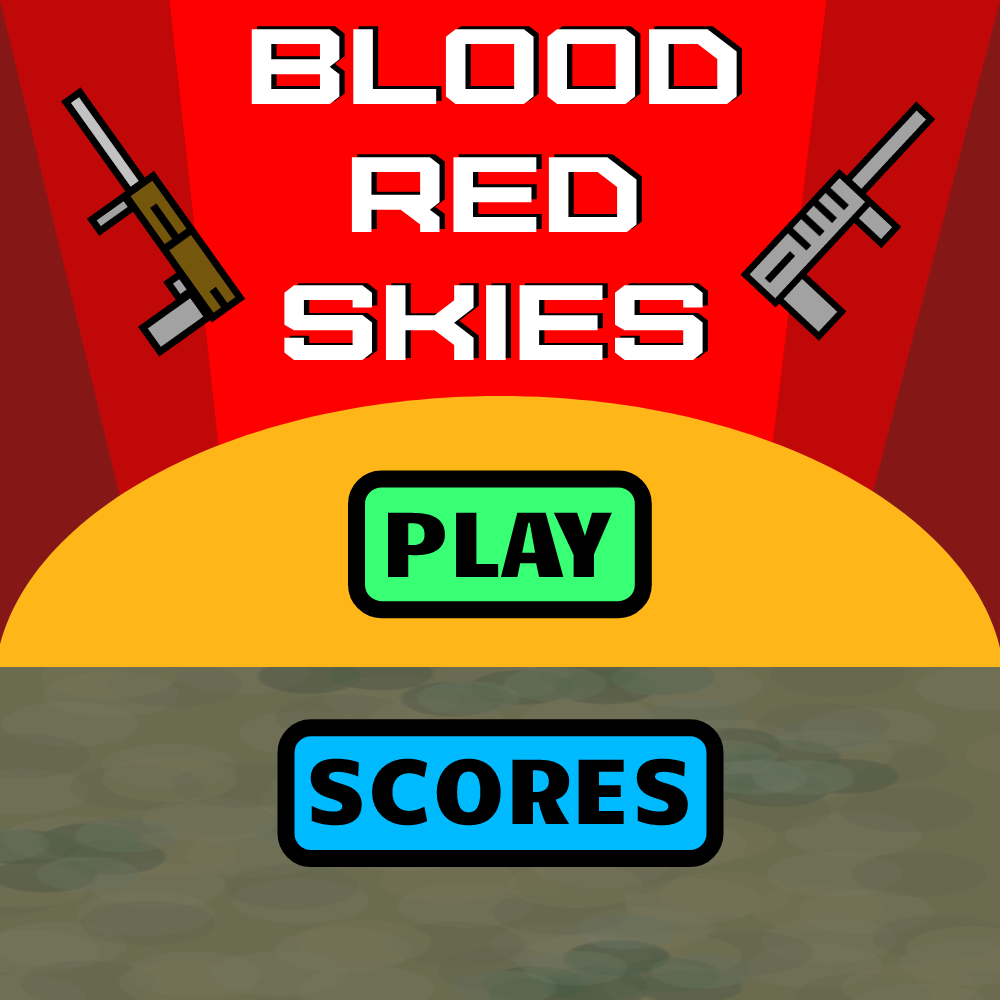
<style>
.page{position:relative;width:1000px;height:1000px}
.page>*{position:absolute;margin:0}
.t1{font:106.9px "Furore";color:#ffffff;scale:1.3 1}
.t2{font:92.9px "Candal";color:#000000}
</style>
<div class="page">
<p class="t1" style="left:251px;top:29px;width:486px;height:331px;text-align:center">BLOOD<br>RED<br>SKies</p>
<p class="t1" style="left:257px;top:26px;width:485px;height:332px;text-align:center">BLOOD<br>RED<br>SKies</p>
<p class="t2" style="left:388px;top:512px;width:224px;height:65px">PLAY</p>
<p class="t2" style="left:310px;top:758px;width:378px;height:68px">SCORES</p>
</div>
